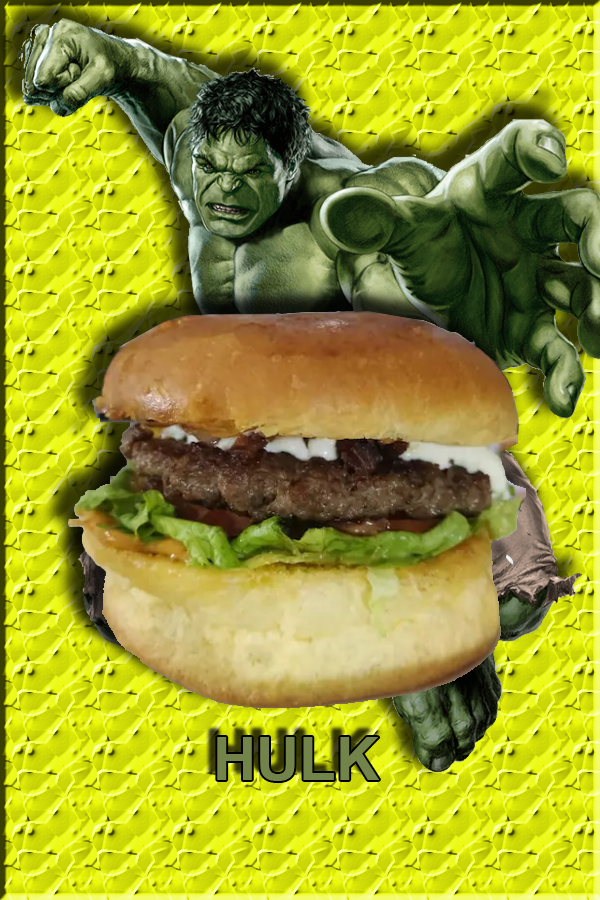
<style>
.page{position:relative;width:600px;height:900px}
.page>*{position:absolute;margin:0}
.t1{font:60px "Arial-BoldMT";color:#73844a}
</style>
<div class="page">
<p class="t1" style="left:217px;top:737px;width:162px;height:44px">HULK</p>
</div>
